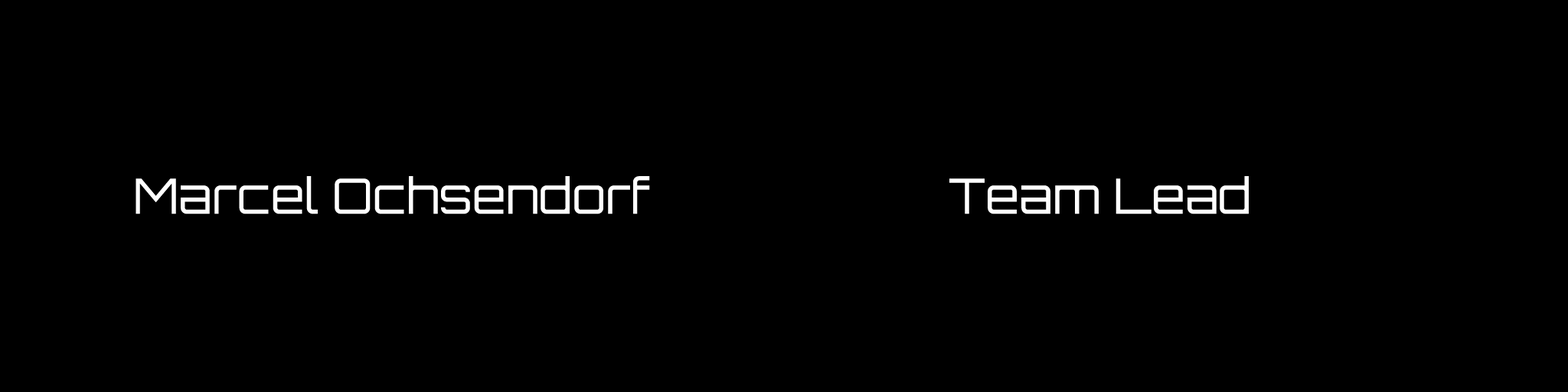
<style>
.page{position:relative;width:1568px;height:392px;background:#000000}
.page>*{position:absolute;margin:0}
.t1{font:48.6px "Orbitron-Light";color:#ffffff}
</style>
<div class="page">
<p class="t1" style="left:136px;top:176px;width:1113px;height:38px">Marcel Ochsendorf Team Lead</p>
</div>
